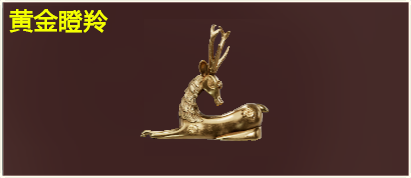
<style>
.page{position:relative;width:411px;height:178px}
.page>*{position:absolute;margin:0}
.t1{font:24px "MicrosoftYaHeiUI";color:#f4ff00;font-weight:bold}
</style>
<div class="page">
<p class="t1" style="left:9px;top:9px;width:99px;height:24px">黄金瞪羚</p>
</div>
